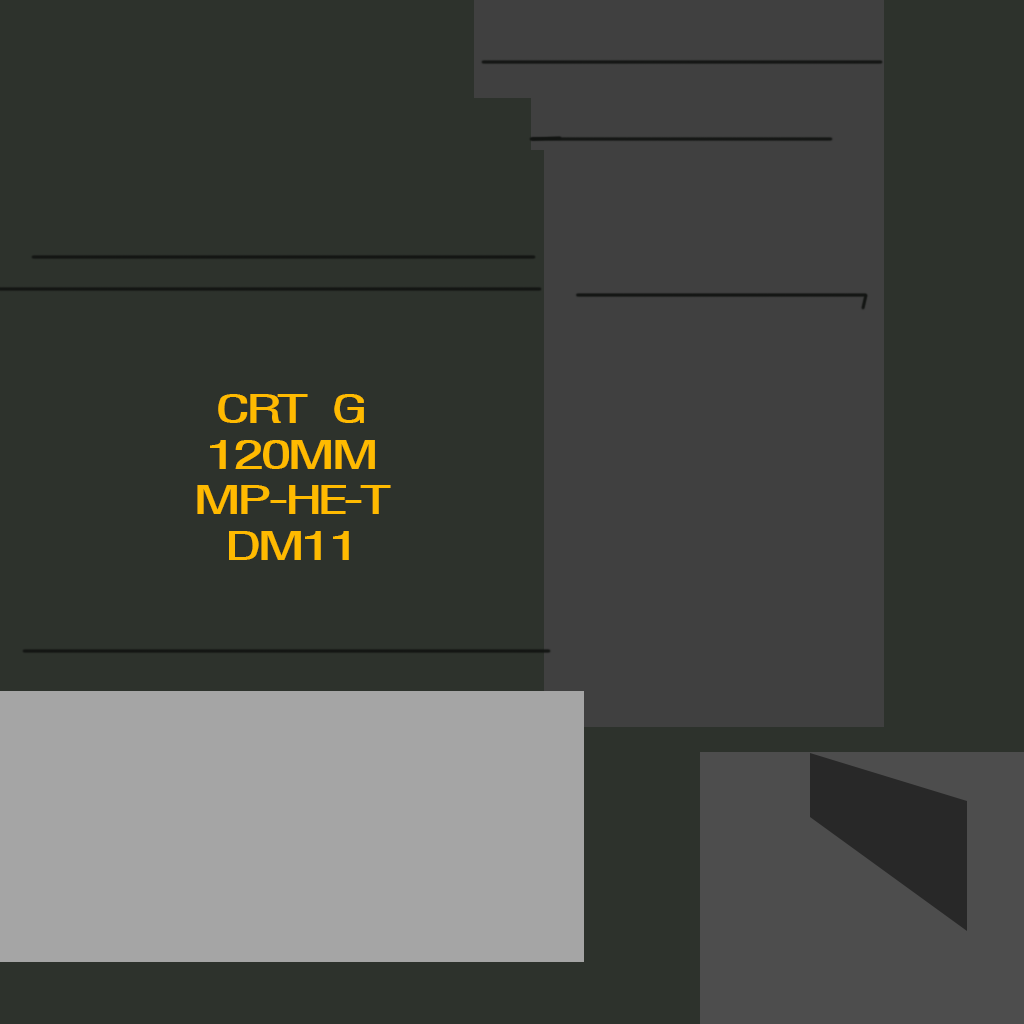
<style>
.page{position:relative;width:1024px;height:1024px;background:#2d322c}
.page>*{position:absolute;margin:0}
.t1{font:36px/45.6px "MoeumTR-HM";letter-spacing:-0.08em;color:#ffba00;scale:1.62 1}
</style>
<div class="page">
<p class="t1" style="left:197px;top:394px;width:194px;height:166px;text-align:center">CRT G<br>120MM<br>MP-HE-T<br>DM11</p>
</div>
